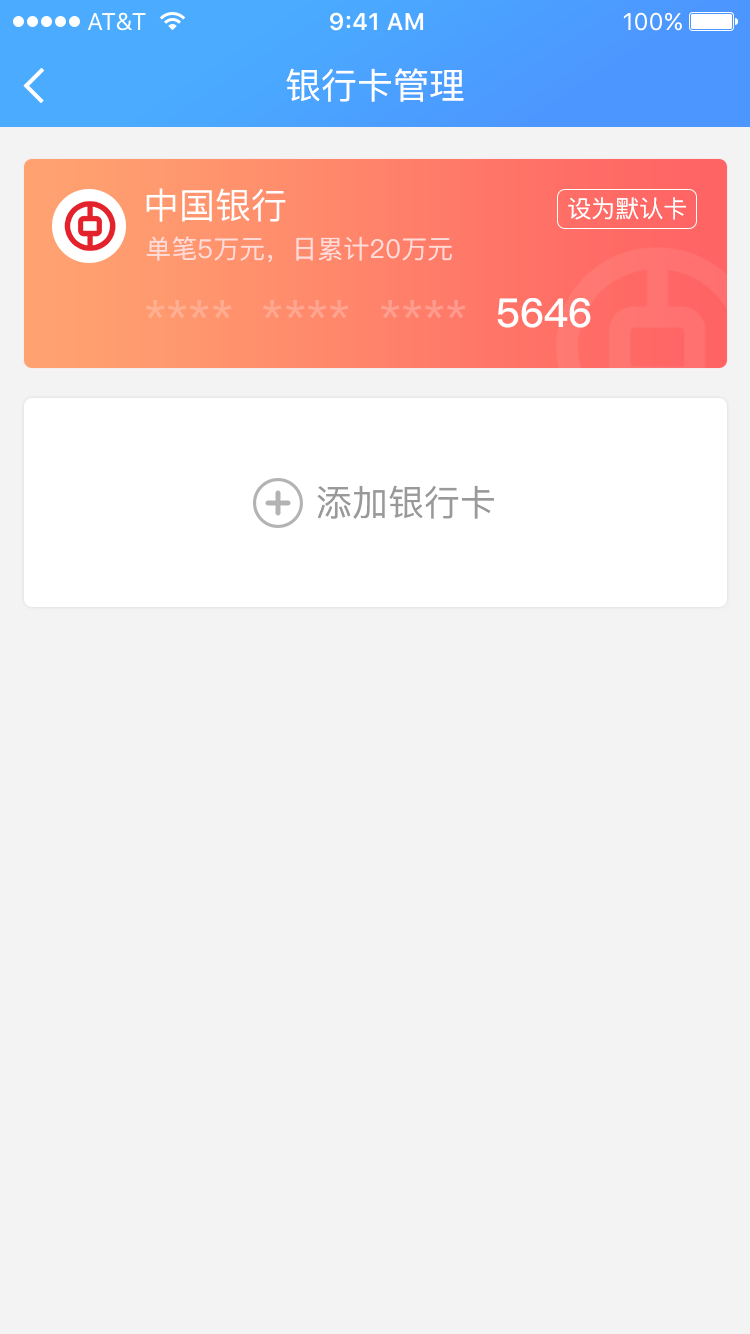
<style>
.page{position:relative;width:750px;height:1334px;background:#f3f3f3}
.page>*{position:absolute;margin:0}
.t1{font:36px "PingFang-SC-Medium";color:#ffffff}
.t2{font:24px "PingFang-SC-Medium";color:#ffffff}
.t3{font:26px "PingFang-SC-Medium";color:#ffdcd9}
.t4{font:48.6px "MicrosoftYaHei";color:#ffa590}
.t5{font:40px "PingFang-SC-Bold";color:#ffffff}
.t6{font:36px "PingFang-SC-Medium";color:#999999}
</style>
<div class="page">
<p class="t1" style="left:286px;top:68px;width:178px;height:34px">银行卡管理</p>
<p class="t1" style="left:146px;top:188px;width:140px;height:34px">中国银行</p>
<p class="t2" style="left:568px;top:197px;width:118px;height:23px">设为默认卡</p>
<p class="t3" style="left:146px;top:236px;width:306px;height:27px">单笔5万元，日累计20万元</p>
<p class="t4" style="left:146px;top:300px;width:320px;height:19px">****  ****  ****</p>
<p class="t5" style="left:497px;top:298px;width:94px;height:30px">5646</p>
<p class="t6" style="left:317px;top:485px;width:177px;height:34px">添加银行卡</p>
</div>
